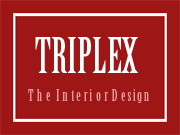
<style>
.page{position:relative;width:180px;height:135px;background:#9e1616}
.page>*{position:absolute;margin:0}
.t1{font:48px "BirchStd";color:#f8ffff}
.t2{font:15.3px "BirchStd";color:#e69898;scale:1.03 1}
</style>
<div class="page">
<p class="t1" style="left:35px;top:37px;width:103px;height:36px">TRIPLEX</p>
<p class="t2" style="left:28px;top:89px;width:121px;height:14px">T  h  e   I  n  t e  r i  o  r  D  e s i g n</p>
</div>
